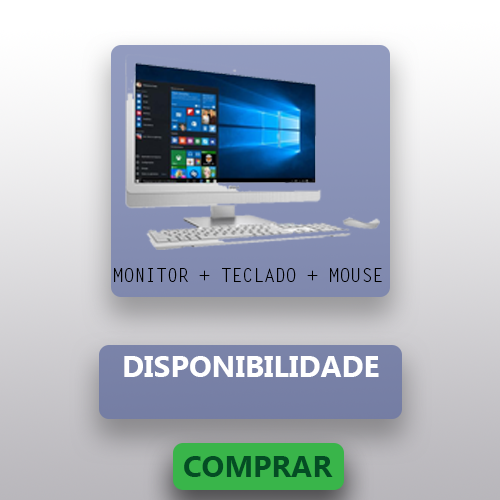
<style>
.page{position:relative;width:500px;height:500px}
.page>*{position:absolute;margin:0}
.t1{font:18px "LetterGothicStd";color:#000000}
.t2{font:30px "MicrosoftTaiLe-Bold";color:#ffffff}
.t3{font:30px "MicrosoftTaiLe-Bold";color:#044d24}
</style>
<div class="page">
<p class="t1" style="left:114px;top:268px;width:268px;height:14px">MONITOR + TECLADO + MOUSE</p>
<p class="t2" style="left:124px;top:356px;width:255px;height:21px">DISPONIBILIDADE</p>
<p class="t3" style="left:184px;top:456px;width:149px;height:21px">COMPRAR</p>
</div>
